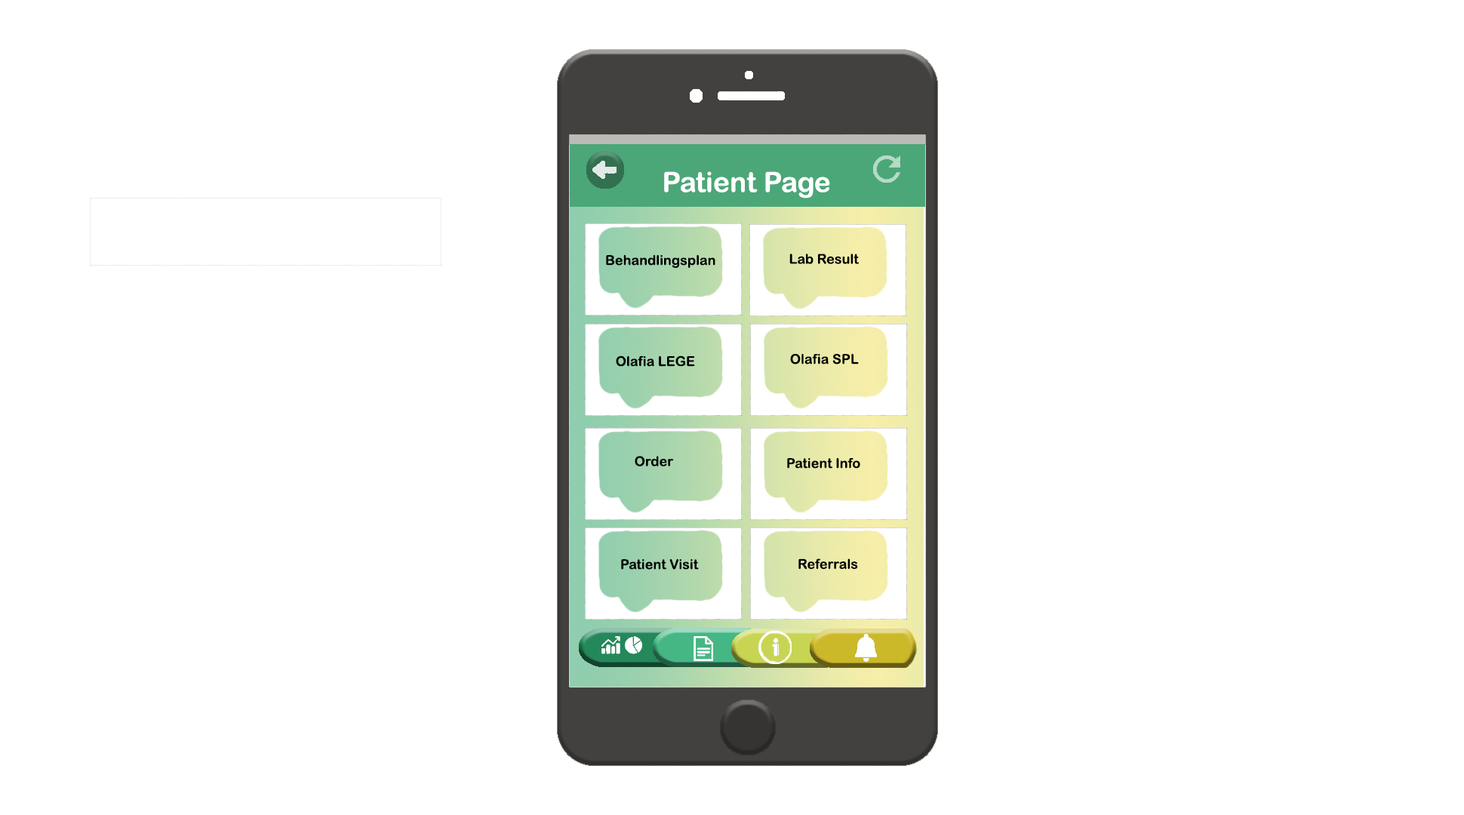
<style>
.page{position:relative;width:1464px;height:815px;background:#ffffff}
.page>*{position:absolute;margin:0}
.t1{font:27.9px "ArialRoundedMTBold";color:#ffffff}
.t2{font:13.6px "ArialRoundedMTBold";color:#000000}
</style>
<div class="page">
<p class="t1" style="left:664px;top:171px;width:166px;height:27px">Patient Page</p>
<p class="t2" style="left:606px;top:254px;width:109px;height:14px">Behandlingsplan</p>
<p class="t2" style="left:789px;top:253px;width:70px;height:11px">Lab Result</p>
<p class="t2" style="left:790px;top:353px;width:69px;height:11px">Olafia SPL</p>
<p class="t2" style="left:616px;top:355px;width:79px;height:12px">Olafia LEGE</p>
<p class="t2" style="left:634px;top:456px;width:40px;height:10px">Order</p>
<p class="t2" style="left:787px;top:457px;width:73px;height:11px">Patient Info</p>
<p class="t2" style="left:621px;top:558px;width:78px;height:12px">Patient Visit</p>
<p class="t2" style="left:798px;top:558px;width:60px;height:11px">Referrals</p>
</div>
